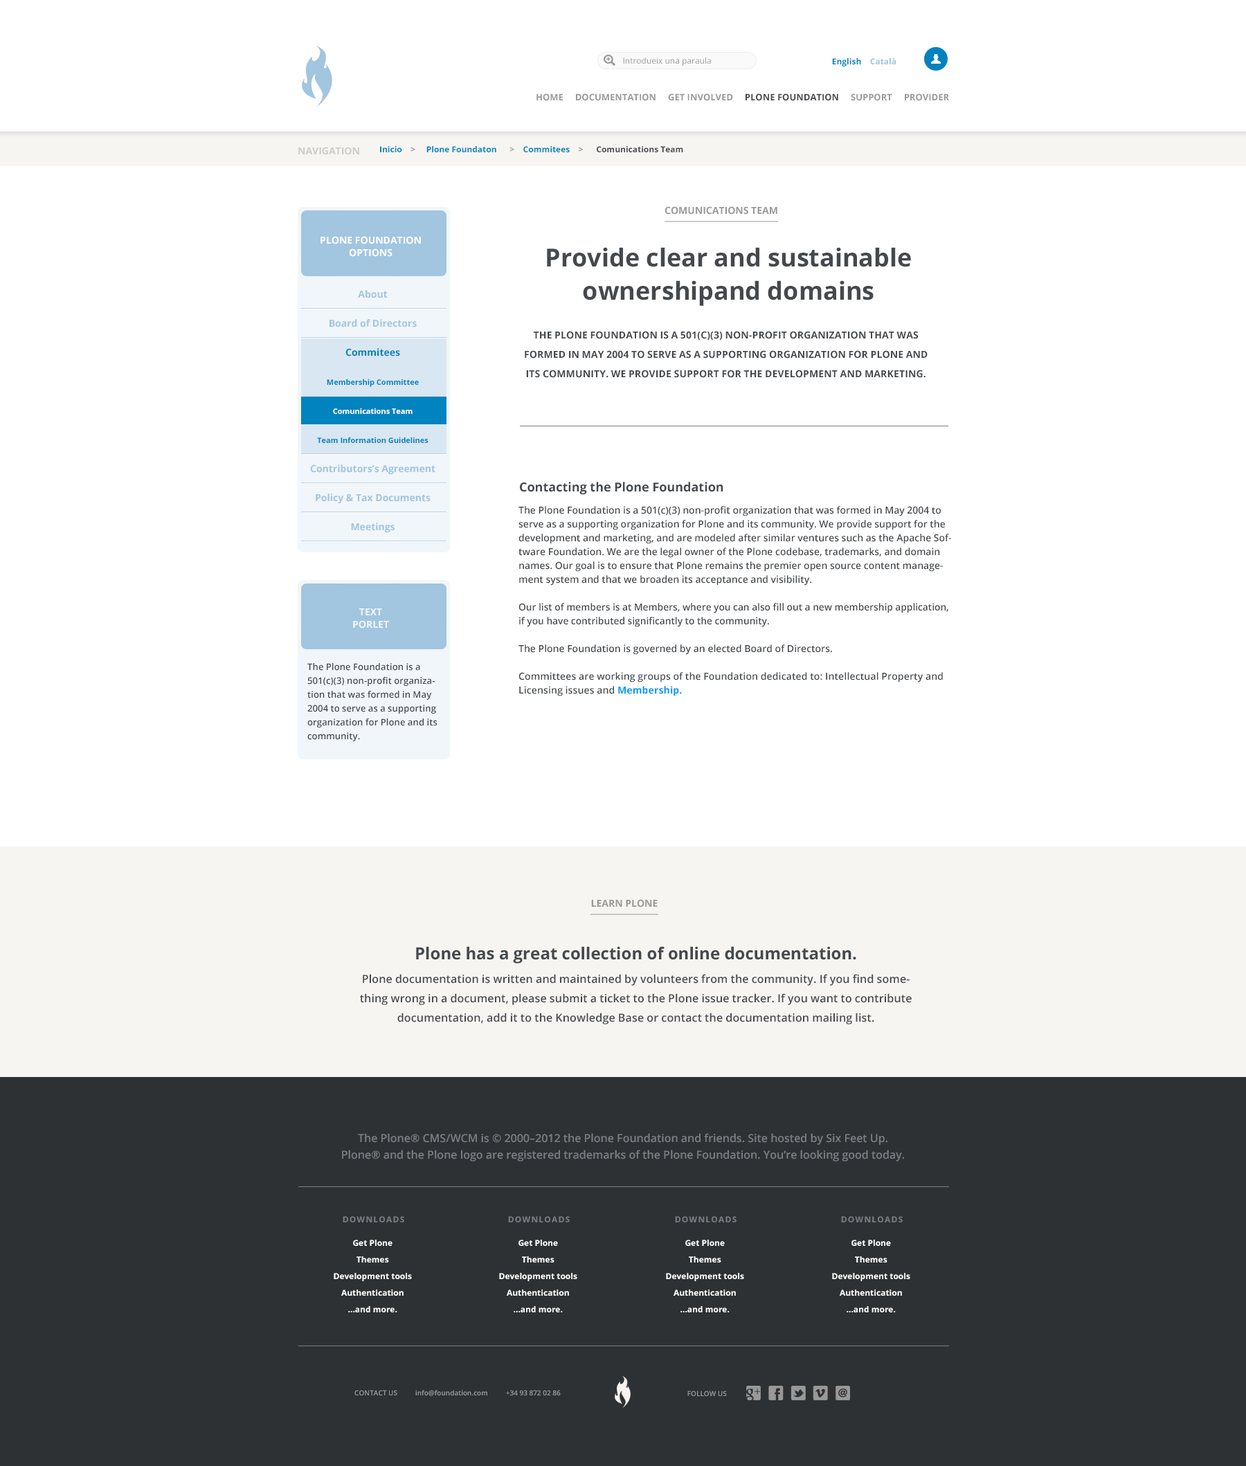
<style>
.page{position:relative;width:1246px;height:1466px;background:#ffffff}
.page>*{position:absolute;margin:0}
.t1{font:8.3px "OpenSans";color:#999999}
.t2{font:8.3px "OpenSans-Bold";color:#0083be}
.t3{font:8.3px "OpenSans-Bold";color:#a2c5e0}
.t4{font:9px "OpenSans-Bold";color:#999999}
.t5{font:9px "OpenSans-Bold";color:#45494d}
.t6{font:9.7px "OpenSans-Bold";color:#cccccc}
.t7{font:8.3px "OpenSans-Bold";color:#45494d}
.t8{font:8.3px "OpenSans-Bold";color:#999999}
.t9{font:9.7px "OpenSans-Bold";color:#999999}
.t10{font:9.7px/12.5px "OpenSans-Bold";color:#ffffff}
.t11{font:24.9px/33.2px "OpenSans-Bold";color:#45494d}
.t12{font:9.7px/19.4px "OpenSans-Bold";color:#45494d;text-transform:uppercase}
.t13{font:12.5px "OpenSans-Bold";color:#45494d}
.t14{font:9.7px/13.8px "OpenSans-Semibold";color:#45494d}
.t15{font:9.7px/13.8px "OpenSans-Bold";color:#0099ff}
.t16{font:9.7px/12.5px "OpenSans-Bold";color:#f1f6fa}
.t17{font:9px/13.8px "OpenSans-Semibold";color:#45494d}
.t18{font:16.6px "OpenSans-Bold";color:#45494d}
.t19{font:11.1px/19.4px "OpenSans-Semibold";color:#45494d}
.t20{font:11.1px/16.6px "OpenSans-Semibold";color:#777e83}
.t21{font:8.3px "OpenSans-Bold";letter-spacing:0.1em;color:#777e83}
.t22{font:8.3px/16.6px "OpenSans-Bold";color:#ffffff}
.t23{font:6.9px "OpenSans-Semibold";color:#999999}
.t24{font:6.9px "OpenSans-Semibold";color:#999999;text-transform:uppercase}
</style>
<div class="page">
<p class="t1" style="left:623px;top:57px;width:88px;height:9px">Introdueix una paraula</p>
<p class="t2" style="left:832px;top:57px;width:64px;height:9px">English<span class="t3">    Català</span></p>
<p class="t4" style="left:537px;top:93px;width:412px;height:8px">HOME     DOCUMENTATION     GET INVOLVED     <span class="t5">PLONE FOUNDATION</span>     SUPPORT     PROVIDER</p>
<p class="t6" style="left:298px;top:147px;width:61px;height:8px">NAVIGATION</p>
<p class="t7" style="left:380px;top:146px;width:303px;height:6px"><span class="t2">Inicio  </span><span class="t8">  &gt;    </span><span class="t2"> Plone Foundaton </span><span class="t8">     &gt;    </span><span class="t2">Commitees </span><span class="t8">   &gt;      </span>Comunications Team</p>
<p class="t9" style="left:665px;top:206px;width:112px;height:9px">COMUNICATIONS TEAM</p>
<p class="t10" style="left:321px;top:236px;width:100px;height:21px;text-align:center">PLONE FOUNDATION<br>OPTIONS</p>
<p class="t11" style="left:547px;top:247px;width:364px;height:59px;text-align:center">Provide clear and sustainable <br>ownershipand domains</p>
<p class="t12" style="left:525px;top:331px;width:403px;height:47px;text-align:center">The Plone Foundation is a 501(c)(3) non-profit organization that was formed in May 2004 to serve as a supporting organization for Plone and its community. We provide support for the development and marketing.</p>
<p class="t13" style="left:520px;top:482px;width:203px;height:13px">Contacting the Plone Foundation</p>
<p class="t14" style="left:519px;top:506px;width:432px;height:190px">The Plone Foundation is a 501(c)(3) non-profit organization that was formed in May 2004 to serve as a supporting organization for Plone and its community. We provide support for the development and marketing, and are modeled after similar ventures such as the Apache Software Foundation. We are the legal owner of the Plone codebase, trademarks, and domain names. Our goal is to ensure that Plone remains the premier open source content management system and that we broaden its acceptance and visibility.<br><br>Our list of members is at Members, where you can also fill out a new membership application, if you have contributed significantly to the community.<br><br>The Plone Foundation is governed by an elected Board of Directors.<br><br>Committees are working groups of the Foundation dedicated to: Intellectual Property and Licensing issues and <span class="t15">Membership.</span></p>
<p class="t16" style="left:353px;top:609px;width:36px;height:20px;text-align:center">TEXT<br>PORLET</p>
<p class="t17" style="left:307px;top:663px;width:131px;height:78px">The Plone Foundation is a 501(c)(3) non-profit organization that was formed in May 2004 to serve as a supporting organization for Plone and its community.</p>
<p class="t9" style="left:591px;top:899px;width:67px;height:9px">LEARN PLONE</p>
<p class="t18" style="left:416px;top:946px;width:440px;height:18px">Plone has a great collection of online documentation.</p>
<p class="t19" style="left:360px;top:974px;width:552px;height:51px;text-align:center">Plone documentation is written and maintained by volunteers from the community. If you find something wrong in a document, please submit a ticket to the Plone issue tracker. If you want to contribute documentation, add it to the Knowledge Base or contact the documentation mailing list.</p>
<p class="t20" style="left:342px;top:1133px;width:563px;height:29px;text-align:center">The Plone® CMS/WCM is © 2000–2012 the Plone Foundation and friends. Site hosted by Six Feet Up.<br>Plone® and the Plone logo are registered trademarks of the Plone Foundation. You’re looking good today.</p>
<p class="t21" style="left:343px;top:1216px;width:61px;height:7px">DOWNLOADS</p>
<p class="t21" style="left:508px;top:1216px;width:62px;height:7px">DOWNLOADS</p>
<p class="t21" style="left:675px;top:1216px;width:62px;height:7px">DOWNLOADS</p>
<p class="t21" style="left:841px;top:1216px;width:62px;height:7px">DOWNLOADS</p>
<p class="t22" style="left:334px;top:1240px;width:78px;height:73px;text-align:center">Get Plone<br>    Themes<br>    Development tools<br>    Authentication<br>    …and more.</p>
<p class="t22" style="left:499px;top:1240px;width:78px;height:73px;text-align:center">Get Plone<br>    Themes<br>    Development tools<br>    Authentication<br>    …and more.</p>
<p class="t22" style="left:666px;top:1240px;width:78px;height:73px;text-align:center">Get Plone<br>    Themes<br>    Development tools<br>    Authentication<br>    …and more.</p>
<p class="t22" style="left:832px;top:1240px;width:78px;height:73px;text-align:center">Get Plone<br>    Themes<br>    Development tools<br>    Authentication<br>    …and more.</p>
<p class="t23" style="left:354px;top:1390px;width:207px;height:6px">CONTACT US          info@foundation.com          +34 93 872 02 86</p>
<p class="t24" style="left:687px;top:1391px;width:40px;height:5px">Follow us</p>
</div>
